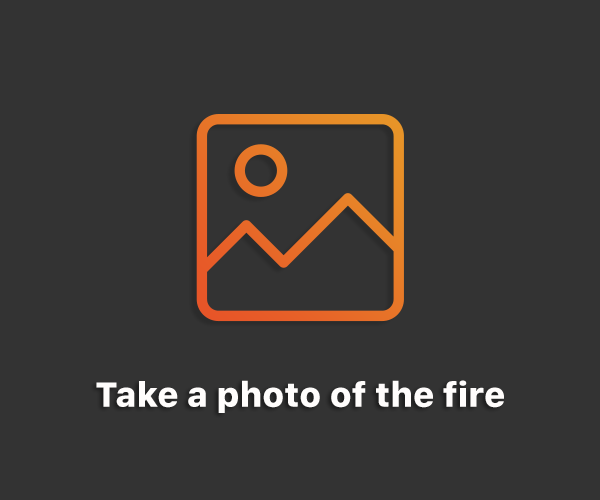
<style>
.page{position:relative;width:600px;height:500px;background:#333333}
.page>*{position:absolute;margin:0}
.t1{font:34.5px "SFUIText-Heavy";color:#fffdfb}
</style>
<div class="page">
<p class="t1" style="left:96px;top:380px;width:408px;height:33px">Take a photo of the fire</p>
</div>
